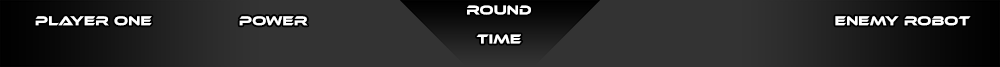
<style>
.page{position:relative;width:1000px;height:67px;background:#333333}
.page>*{position:absolute;margin:0}
.t1{font:13.4px "EthnocentricRg-Regular";color:#ffffff}
</style>
<div class="page">
<p class="t1" style="left:467px;top:5px;width:64px;height:10px">ROUND</p>
<p class="t1" style="left:35px;top:16px;width:117px;height:10px">Player One</p>
<p class="t1" style="left:239px;top:16px;width:69px;height:10px">POWER</p>
<p class="t1" style="left:835px;top:16px;width:136px;height:10px">Enemy Robot</p>
<p class="t1" style="left:476px;top:34px;width:46px;height:10px">TIME</p>
</div>
